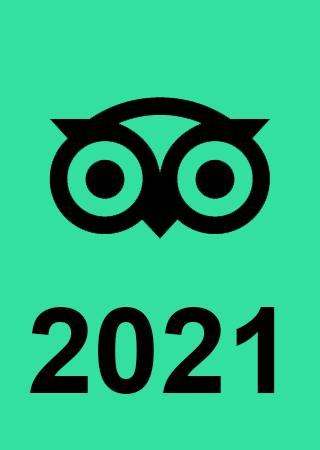
<style>
.page{position:relative;width:320px;height:450px;background:#34e0a1}
.page>*{position:absolute;margin:0}
.t1{font:120px "Arial-BoldMT";color:#000000}
</style>
<div class="page">
<p class="t1" style="left:30px;top:307px;width:245px;height:87px">2021</p>
</div>
